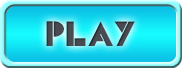
<style>
.page{position:relative;width:182px;height:68px}
.page>*{position:absolute;margin:0}
.t1{font:36px "CSBlocks";color:#494b52}
</style>
<div class="page">
<p class="t1" style="left:46px;top:21px;width:89px;height:25px">Play</p>
</div>
